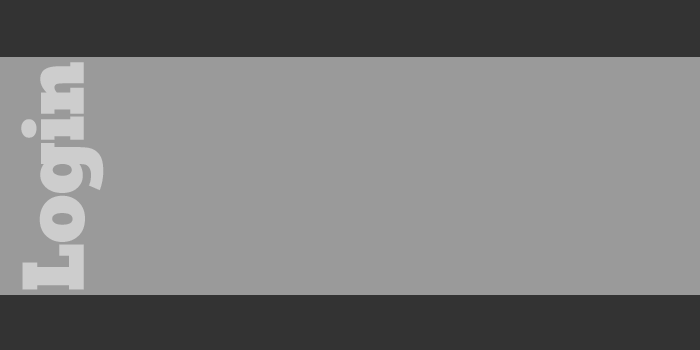
<style>
.page{position:relative;width:700px;height:350px;background:#9a9a9a}
.page>*{position:absolute;margin:0}
.t1{font:90.1px "Rockwell-ExtraBold";letter-spacing:-0.025em;color:#cdcdcd;scale:0.77 1}
</style>
<div class="page">
<p class="t1" style="left:21px;top:62px;width:83px;height:228px;rotate:-90deg">Login</p>
</div>
